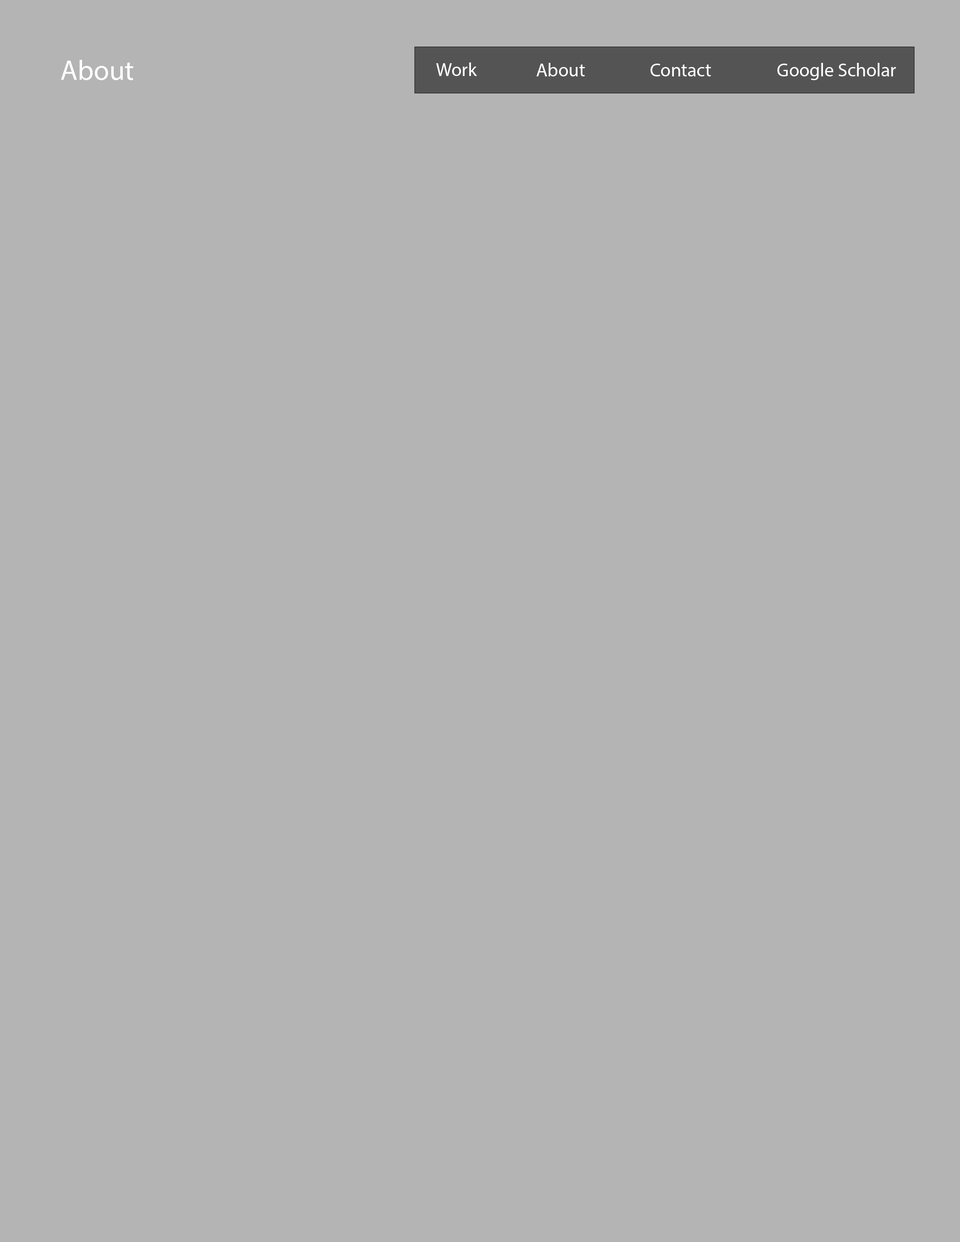
<style>
.page{position:relative;width:960px;height:1242px;background:#b4b4b4}
.page>*{position:absolute;margin:0}
.t1{font:28.2px "MyriadPro-Regular";color:#ffffff}
.t2{font:18.8px "MyriadPro-Regular";color:#ffffff}
</style>
<div class="page">
<p class="t1" style="left:61px;top:60px;width:72px;height:20px">About</p>
<p class="t2" style="left:436px;top:62px;width:41px;height:14px">Work</p>
<p class="t2" style="left:536px;top:63px;width:49px;height:13px">About</p>
<p class="t2" style="left:650px;top:64px;width:61px;height:12px">Contact</p>
<p class="t2" style="left:777px;top:63px;width:119px;height:17px">Google Scholar</p>
</div>
